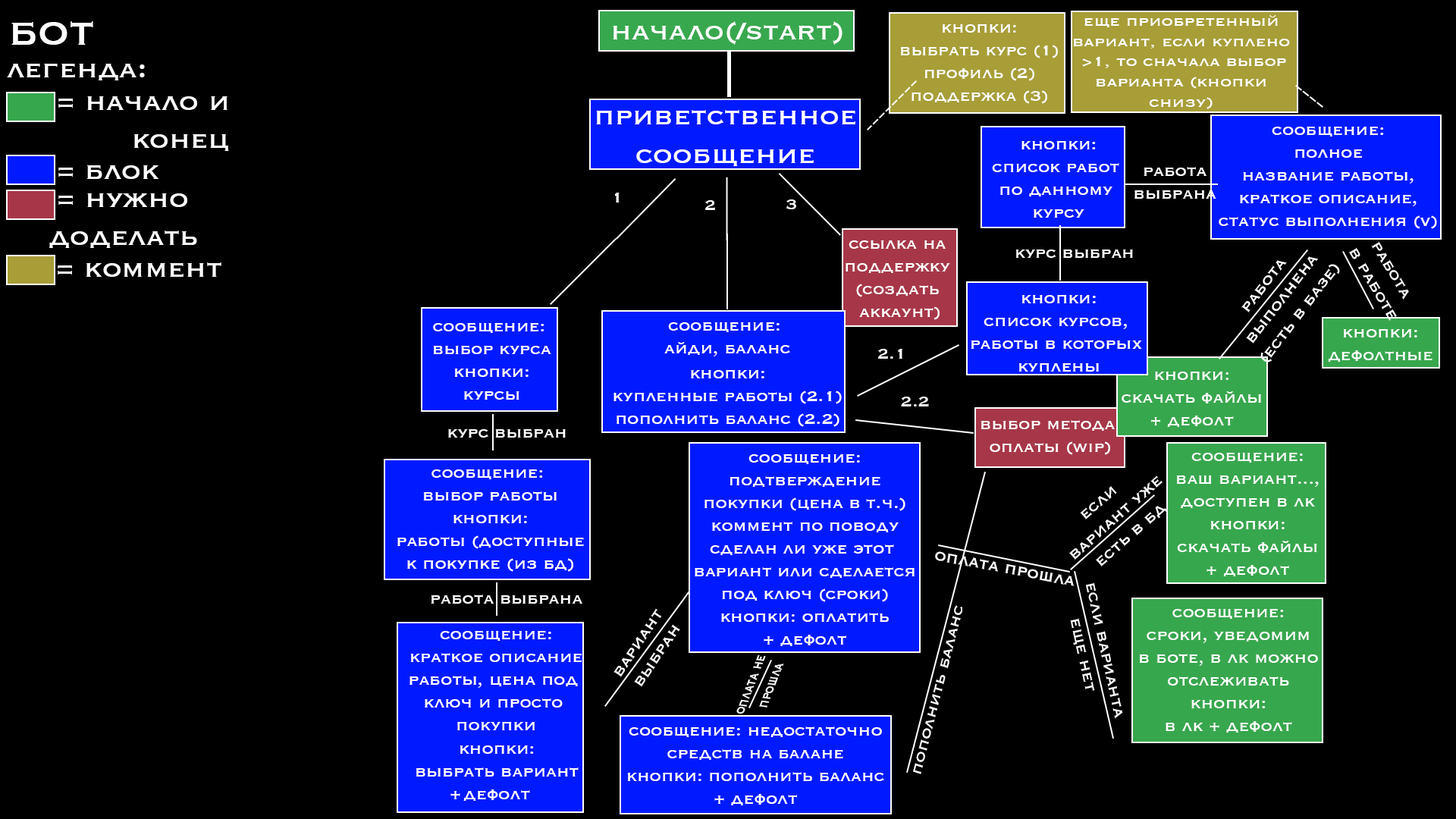
<style>
.page{position:relative;width:1456px;height:819px;background:#000000}
.page>*{position:absolute;margin:0}
.t1{font:16.9px "Copperplate";color:#ffffff;scale:1.12 1}
.t2{font:50.6px "Copperplate";color:#ffffff}
.t3{font:31.8px "Copperplate";color:#ffffff}
.t4{font:19px "Copperplate";color:#ffffff}
.t5{font:20px "Copperplate";color:#ffffff;scale:0.95 1}
.t6{font:18px "Copperplate";color:#ffffff;scale:1.04 1}
.t7{font:16.8px "Copperplate";color:#ffffff;scale:0.76 1}
</style>
<div class="page">
<p class="t1" style="left:1073px;top:15px;width:217px;height:94px;text-align:center">еще приобретенный<br>вариант, если куплено<br> &gt;1, то сначала выбор<br>варианта (кнопки<br>снизу)</p>
<p class="t2" style="left:11px;top:21px;width:82px;height:24px">бот</p>
<p class="t3" style="left:613px;top:21px;width:229px;height:24px">начало(/start)</p>
<p class="t4" style="left:900px;top:24px;width:158px;height:80px;text-align:center">кнопки:<br>выбрать курс (1)<br>профиль (2)<br>поддержка (3)</p>
<p class="t3" style="left:7px;top:64px;width:138px;height:16px">легенда:</p>
<p class="t3" style="left:58px;top:96px;width:171px;height:55px;text-align:right">= начало и<br>конец</p>
<p class="t3" style="left:596px;top:110px;width:259px;height:56px;text-align:center">приветственное<br>сообщение</p>
<p class="t4" style="left:1219px;top:127px;width:218px;height:102px;text-align:center">сообщение:<br>полное<br>название работы,<br>краткое описание,<br>статус выполнения (v)</p>
<p class="t4" style="left:992px;top:141px;width:127px;height:77px;text-align:center">кнопки:<br>список работ <br>по данному <br>курсу</p>
<p class="t3" style="left:58px;top:165px;width:100px;height:14px">= блок</p>
<p class="t4" style="left:1134px;top:167px;width:82px;height:32px;text-align:center">работа<br>выбрана</p>
<p class="t3" style="left:49px;top:193px;width:148px;height:55px;text-align:right">= нужно <br>доделать</p>
<p class="t4" style="left:615px;top:193px;width:5px;height:9px">1</p>
<p class="t4" style="left:705px;top:200px;width:10px;height:10px">2</p>
<p class="t4" style="left:786px;top:199px;width:10px;height:10px">3</p>
<p class="t4" style="left:846px;top:240px;width:104px;height:80px;text-align:center">ссылка на <br>поддержку <br>(создать <br>аккаунт)</p>
<p class="t4" style="left:1349px;top:241px;width:60px;height:80px;text-align:center;rotate:59deg">работа <br>в работе</p>
<p class="t4" style="left:1015px;top:249px;width:118px;height:9px">курс выбран</p>
<p class="t4" style="left:1241px;top:256px;width:99px;height:106px;text-align:center;rotate:-52deg">работа<br>выполнена<br>(есть в базе)</p>
<p class="t3" style="left:58px;top:262px;width:163px;height:15px">= коммент</p>
<p class="t4" style="left:971px;top:295px;width:171px;height:77px;text-align:center">кнопки:<br>список курсов, <br>работы в которых <br>куплены</p>
<p class="t4" style="left:433px;top:323px;width:118px;height:77px;text-align:center">сообщение: <br>выбор курса<br>кнопки:<br>курсы</p>
<p class="t4" style="left:664px;top:322px;width:126px;height:34px;text-align:center">сообщение: <br>айди, баланс</p>
<p class="t4" style="left:1328px;top:329px;width:104px;height:33px;text-align:center">кнопки:<br>дефолтные</p>
<p class="t4" style="left:878px;top:349px;width:24px;height:10px">2.1</p>
<p class="t4" style="left:613px;top:370px;width:229px;height:57px;text-align:center">кнопки:<br>купленные работы (2.1)<br>пополнить баланс (2.2)</p>
<p class="t4" style="left:1122px;top:372px;width:139px;height:55px;text-align:center">кнопки:<br>скачать файлы<br>+ дефолт</p>
<p class="t4" style="left:901px;top:397px;width:28px;height:9px">2.2</p>
<p class="t4" style="left:981px;top:420px;width:134px;height:35px;text-align:center">выбор метода <br>оплаты (wip)</p>
<p class="t4" style="left:448px;top:429px;width:118px;height:9px">курс выбран</p>
<p class="t4" style="left:695px;top:454px;width:220px;height:192px;text-align:center">сообщение:<br>подтверждение<br>покупки (цена в т.ч.)<br>коммент по поводу<br>сделан ли уже этот <br>вариант или сделается<br>под ключ (сроки)<br>кнопки: оплатить<br>+ дефолт</p>
<p class="t4" style="left:1176px;top:453px;width:143px;height:123px;text-align:center">сообщение:<br>ваш вариант...,<br>доступен в лк<br>кнопки:<br>скачать файлы<br>+ дефолт</p>
<p class="t4" style="left:397px;top:469px;width:187px;height:103px;text-align:center">сообщение: <br>выбор работы<br>кнопки:<br>работы (доступные<br>к покупке (из бд)</p>
<p class="t4" style="left:1069px;top:475px;width:99px;height:91px;text-align:center;rotate:-41deg">если <br>вариант уже<br>есть в бд</p>
<p class="t5" style="left:935px;top:551px;width:139px;height:35px;rotate:11deg">оплата прошла</p>
<p class="t4" style="left:1070px;top:582px;width:53px;height:137px;text-align:center;rotate:78deg">если варианта<br>еще нет</p>
<p class="t4" style="left:431px;top:595px;width:151px;height:9px">работа выбрана</p>
<p class="t6" style="left:913px;top:605px;width:49px;height:169px;rotate:-76deg">пополнить баланс</p>
<p class="t4" style="left:613px;top:608px;width:67px;height:79px;text-align:center;rotate:-56deg">вариант<br>выбран</p>
<p class="t4" style="left:1139px;top:609px;width:179px;height:124px;text-align:center">сообщение:<br>сроки, уведомим<br>в боте, в лк можно<br>отслеживать<br>кнопки:<br>в лк + дефолт</p>
<p class="t4" style="left:409px;top:631px;width:173px;height:99px;text-align:center">сообщение:<br>краткое описание<br>работы, цена под <br>ключ и просто <br>покупки</p>
<p class="t7" style="left:736px;top:655px;width:48px;height:59px;text-align:center;rotate:-69deg">оплата не <br>прошла</p>
<p class="t4" style="left:627px;top:726px;width:257px;height:79px;text-align:center">сообщение: недостаточно<br>средств на балане<br>кнопки: пополнить баланс<br>+ дефолт</p>
<p class="t4" style="left:416px;top:745px;width:163px;height:56px;text-align:center">кнопки:<br>выбрать вариант<br>дефолт</p>
</div>
